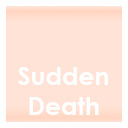
<style>
.page{position:relative;width:128px;height:128px;background:#ffe3d6}
.page>*{position:absolute;margin:0}
.t1{font:25px "CenturyGothic-Bold";color:#ffffff}
</style>
<div class="page">
<p class="t1" style="left:18px;top:67px;width:90px;height:48px;text-align:center">Sudden<br>Death</p>
</div>
